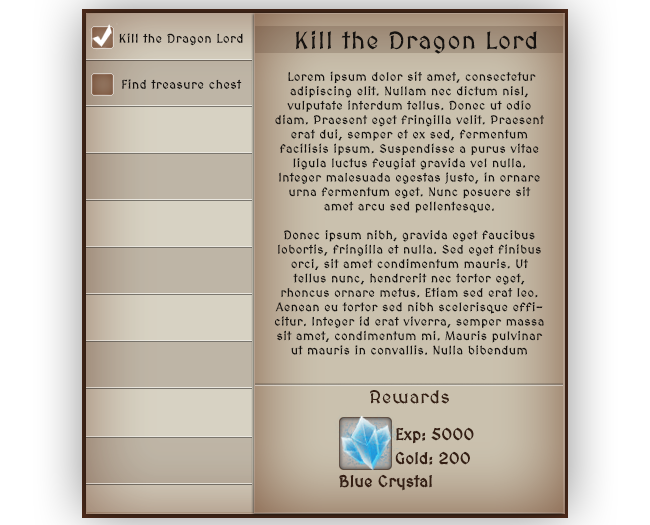
<style>
.page{position:relative;width:650px;height:525px}
.page>*{position:absolute;margin:0}
.t1{font:24px "MedievalSharp";letter-spacing:0.06em;color:#151210}
.t2{font:12.3px "MedievalSharp";letter-spacing:0.06em;color:#151210}
.t3{font:12px "MedievalSharp";letter-spacing:0.06em;color:#151210}
.t4{font:18px "MedievalSharp";letter-spacing:0.06em;color:#362014}
.t5{font:16px "MedievalSharp";color:#351f14;font-weight:bold}
</style>
<div class="page">
<p class="t1" style="left:296px;top:30px;width:241px;height:24px">Kill the Dragon Lord</p>
<p class="t2" style="left:119px;top:33px;width:124px;height:13px">Kill the Dragon Lord</p>
<p class="t3" style="left:274px;top:71px;width:270px;height:284px;text-align:center">Lorem ipsum dolor sit amet, consectetur adipiscing elit. Nullam nec dictum nisl, vulputate interdum tellus. Donec ut odio diam. Praesent eget fringilla velit. Praesent erat dui, semper et ex sed, fermentum facilisis ipsum. Suspendisse a purus vitae ligula luctus feugiat gravida vel nulla. Integer malesuada egestas justo, in ornare urna fermentum eget. Nunc posuere sit amet arcu sed pellentesque.<br><br>Donec ipsum nibh, gravida eget faucibus lobortis, fringilla et nulla. Sed eget finibus orci, sit amet condimentum mauris. Ut tellus nunc, hendrerit nec tortor eget, rhoncus ornare metus. Etiam sed erat leo. Aenean eu tortor sed nibh scelerisque efficitur. Integer id erat viverra, semper massa sit amet, condimentum mi. Mauris pulvinar ut mauris in convallis. Nulla bibendum magna nec ipsum fermentum ultricies. Duis vestibulum quis odio id ullamcorper. Curabitur vel mi eget dolor feugiat viverra quis id orci. Morbi in libero malesuada, sodales odio sed, vehicula ligula. Maecenas semper metus eu euismod feugiat. Praesent consectetur odio felis, eget venenatis eros pretium et. Donec egestas velit id sem vulputate mattis. Etiam pharetra velit rutrum, dictum nibh vel, rhoncus velit. Phasellus nibh velit, iaculis ut tellus in, auctor malesuada arcu.</p>
<p class="t2" style="left:122px;top:79px;width:120px;height:10px">Find treasure chest</p>
<p class="t4" style="left:370px;top:390px;width:79px;height:14px">Rewards</p>
<p class="t5" style="left:396px;top:427px;width:78px;height:17px">Exp: 5000</p>
<p class="t5" style="left:395px;top:451px;width:75px;height:14px">Gold: 200</p>
<p class="t5" style="left:339px;top:474px;width:93px;height:17px">Blue Crystal</p>
</div>
